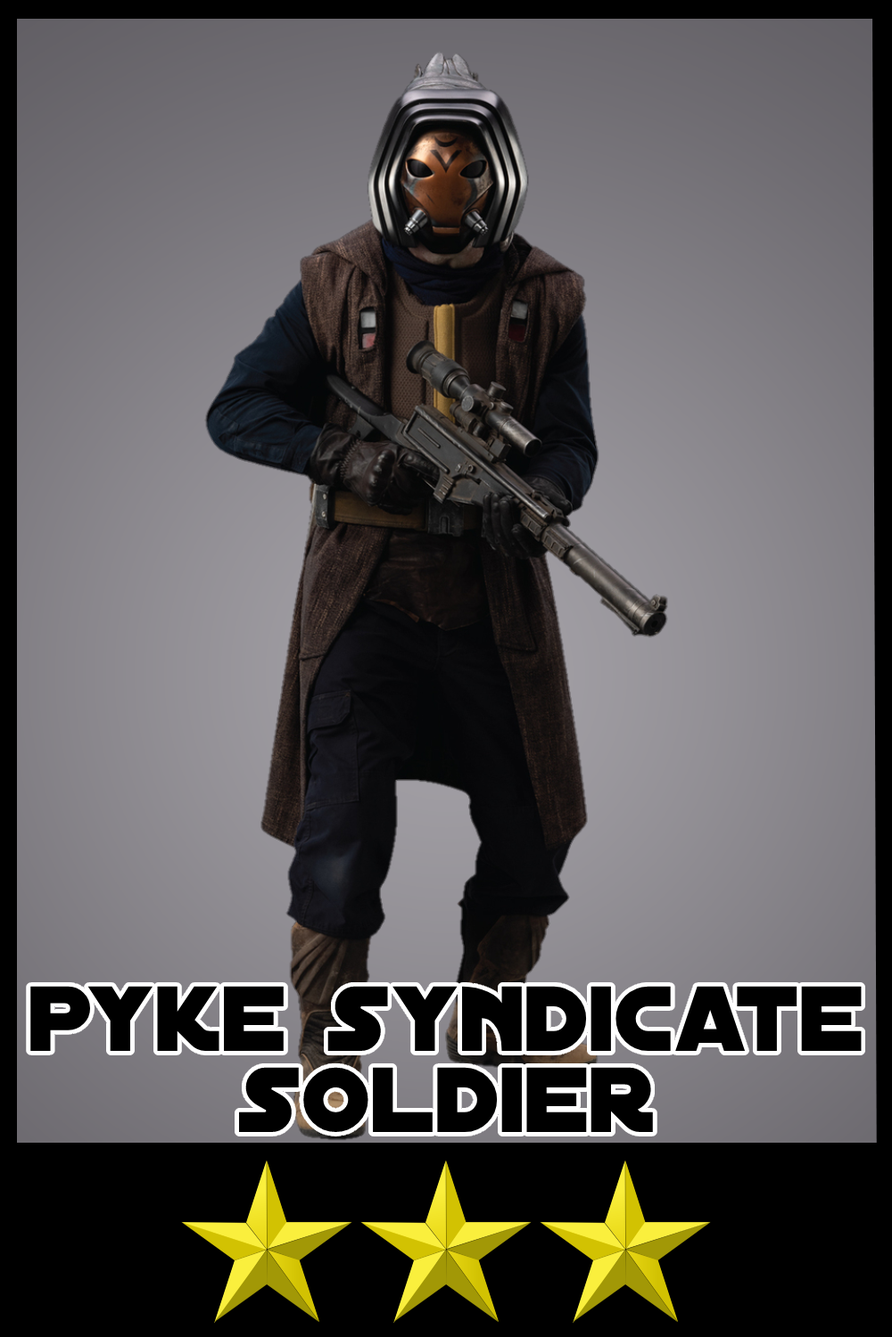
<style>
.page{position:relative;width:892px;height:1337px}
.page>*{position:absolute;margin:0}
.t1{font:99.2px/81.1px "DistantGalaxy";color:#000000}
</style>
<div class="page">
<p class="t1" style="left:30px;top:986px;width:831px;height:146px;text-align:center">pyke syndicate<br>soldier</p>
</div>
